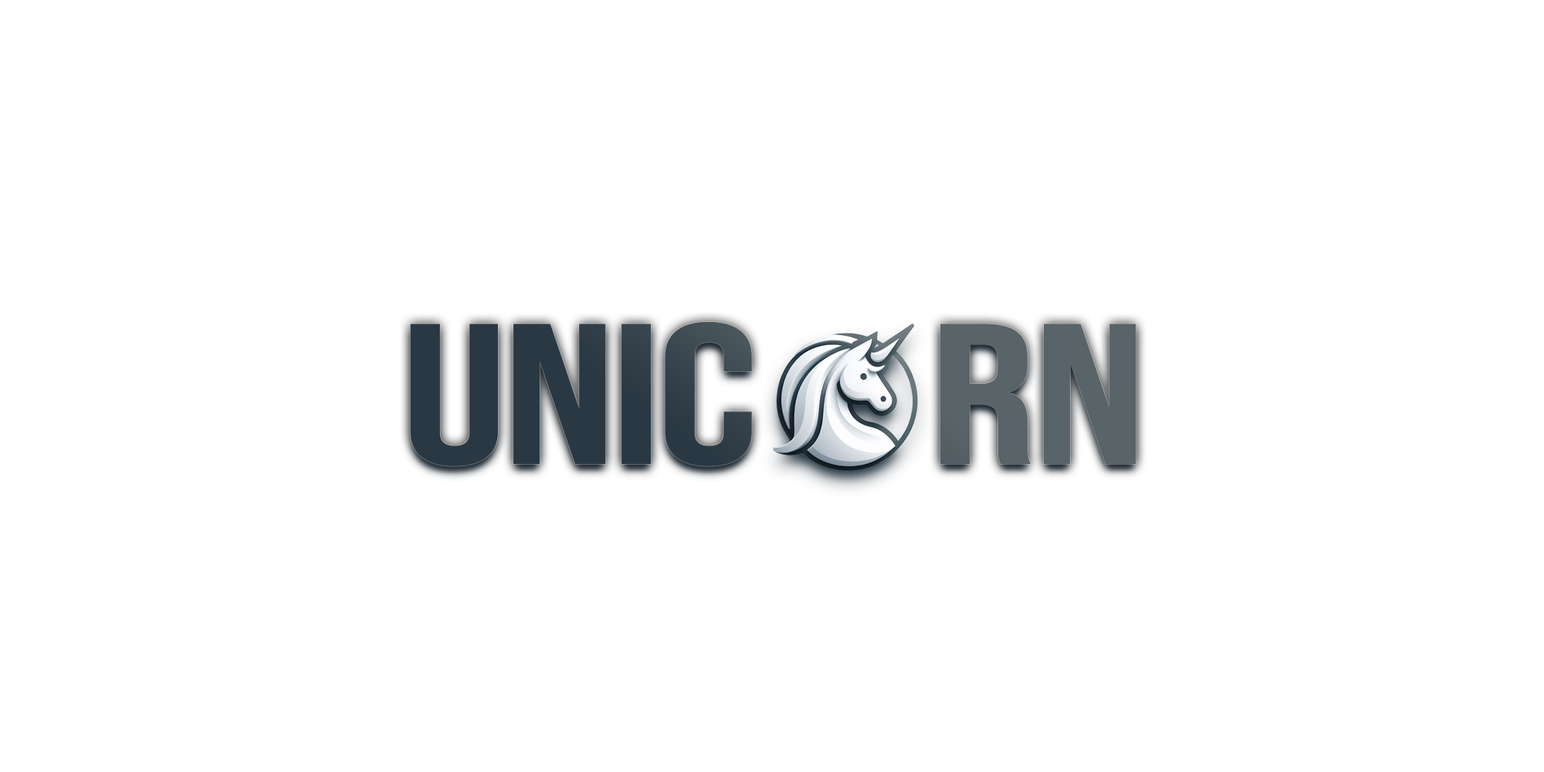
<style>
.page{position:relative;width:1544px;height:772px;background:#ffffff}
.page>*{position:absolute;margin:0}
.t1{font:200px "BebasNeue-Regular";scale:1.33 1}
</style>
<div class="page">
<p class="t1" style="left:410px;top:322px;width:727px;height:144px">Unic    rn</p>
</div>
